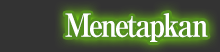
<style>
.page{position:relative;width:220px;height:52px;background:#333333}
.page>*{position:absolute;margin:0}
.t1{font:32px "RyuminPro-ExBold";letter-spacing:-0.08em;color:#ffffff;scale:0.9 1}
</style>
<div class="page">
<p class="t1" style="left:65px;top:13px;width:143px;height:29px">Menetapkan</p>
</div>
